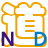
<style>
.page{position:relative;width:48px;height:48px;background:#ffffff}
.page>*{position:absolute;margin:0}
.t1{font:48px "STCaiyun";color:#efa500}
.t2{font:18px "MicrosoftYaHei";color:#3d107b;font-weight:bold}
.t3{font:18px "MicrosoftYaHei";color:#007dc4;font-weight:bold}
</style>
<div class="page">
<p class="t1" style="left:1px;top:2px;width:47px;height:45px">道</p>
<p class="t2" style="left:1px;top:31px;width:13px;height:15px">N</p>
<p class="t3" style="left:34px;top:31px;width:13px;height:15px">D</p>
</div>
